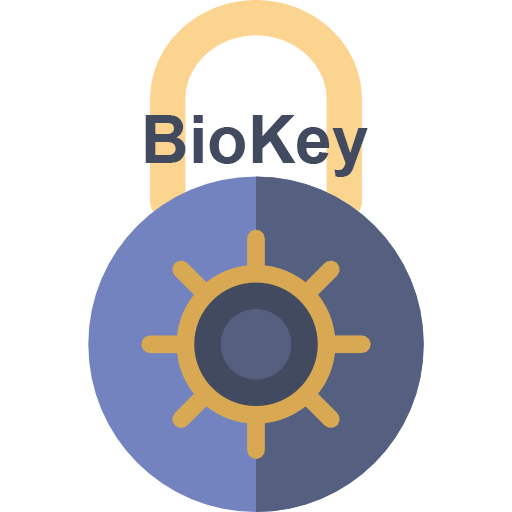
<style>
.page{position:relative;width:512px;height:512px;background:#ffffff}
.page>*{position:absolute;margin:0}
.t1{font:66.2px "Arial-BoldMT";color:#424a60}
</style>
<div class="page">
<p class="t1" style="left:145px;top:115px;width:223px;height:62px">BioKey</p>
</div>
